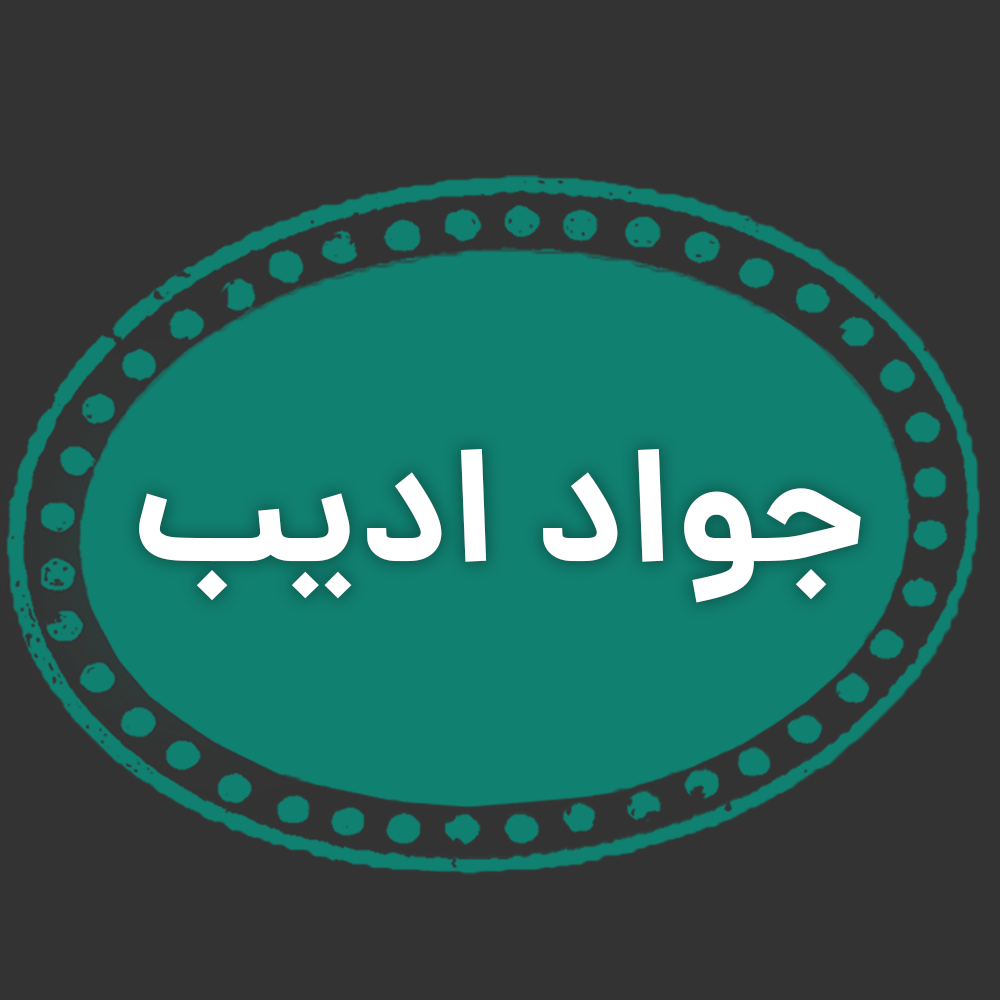
<style>
.page{position:relative;width:1000px;height:1000px;background:#333333}
.page>*{position:absolute;margin:0}
.t1{font:161.5px "Dana2Variable-bold";color:#ffffff}
</style>
<div class="page">
<p class="t1" style="left:139px;top:449px;width:722px;height:154px">جواد ادیب</p>
</div>
